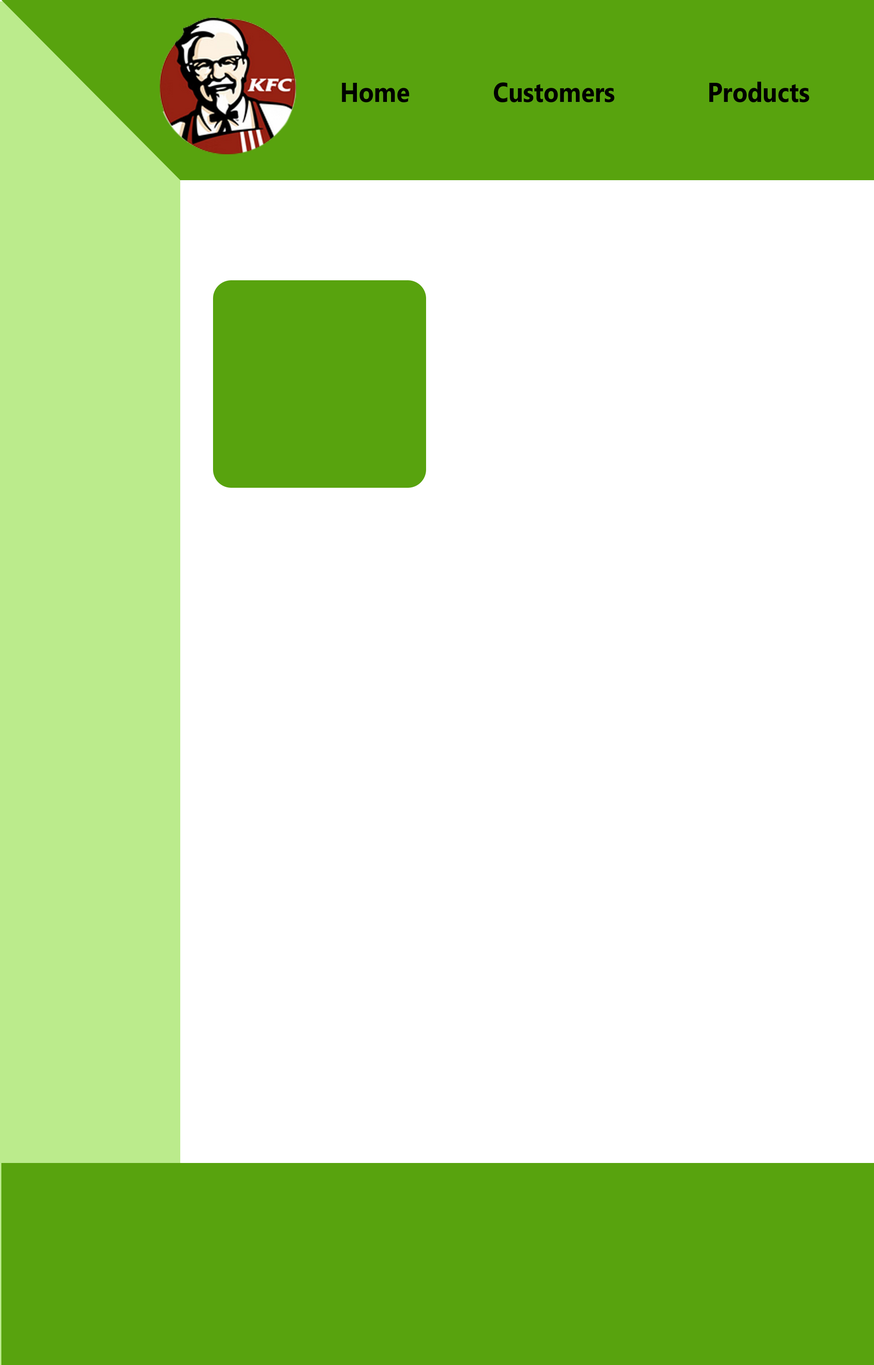
<style>
.page{position:relative;width:874px;height:1365px;background:#ffffff}
.page>*{position:absolute;margin:0}
.t1{font:27.3px "Ebrima-Bold";color:#000000;scale:0.9 1}
</style>
<div class="page">
<p class="t1" style="left:342px;top:83px;width:67px;height:19px">Home</p>
<p class="t1" style="left:494px;top:82px;width:120px;height:20px">Customers</p>
<p class="t1" style="left:709px;top:81px;width:100px;height:21px">Products</p>
</div>
